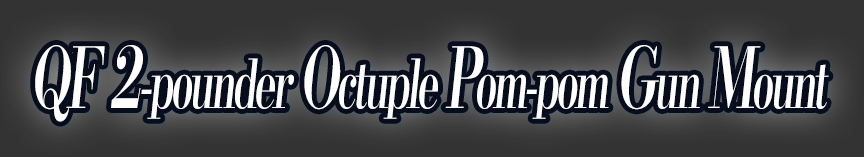
<style>
.page{position:relative;width:864px;height:157px;background:#333333}
.page>*{position:absolute;margin:0}
.t1{font:67.2px "KochoStd-Heavy";letter-spacing:-0.08em;color:#ffffff;font-style:italic;scale:0.6 1}
.t2{font:84px "KochoStd-Heavy";letter-spacing:-0.08em;color:#ffffff;font-style:italic;scale:0.6 1}
</style>
<div class="page">
<p class="t1" style="left:35px;top:45px;width:794px;height:77px"><span class="t2">QF 2</span>-pounder <span class="t2">O</span>ctuple <span class="t2">P</span>om-pom <span class="t2">G</span>un <span class="t2">M</span>ount</p>
</div>
